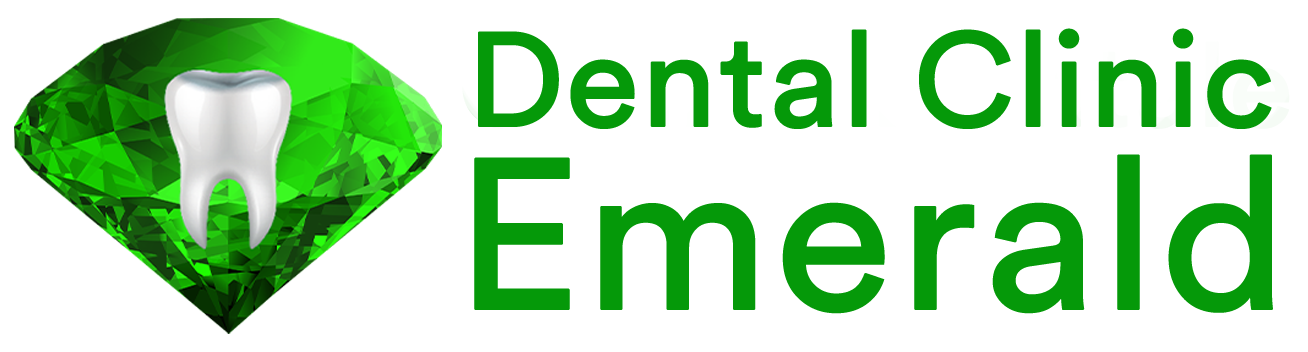
<style>
.page{position:relative;width:1308px;height:352px;background:#ffffff}
.page>*{position:absolute;margin:0}
.t1{font:131.8px "CircularStd-Book";letter-spacing:-0.01em;color:#059909;font-weight:bold}
</style>
<div class="page">
<p class="t1" style="left:478px;top:28px;width:794px;height:101px">Dental Clinic</p>
</div>
